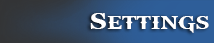
<style>
.page{position:relative;width:214px;height:43px}
.page>*{position:absolute;margin:0}
.t1{font:26px "GodOfWar";color:#ffffff}
</style>
<div class="page">
<p class="t1" style="left:90px;top:13px;width:119px;height:20px">Settings</p>
</div>
